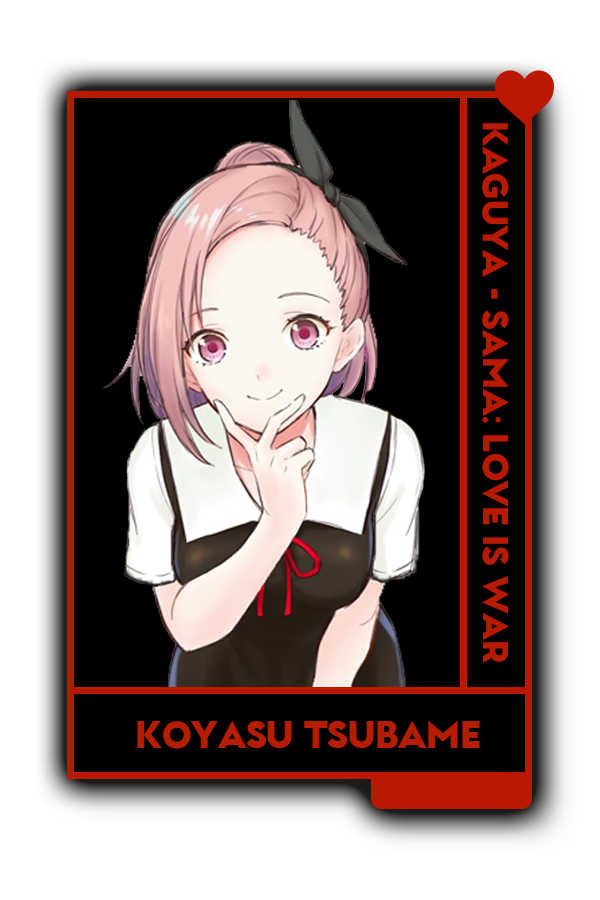
<style>
.page{position:relative;width:600px;height:900px;background:#000000}
.page>*{position:absolute;margin:0}
.t1{font:34px "GarnetCapitalsBlack-Regular";color:#b52616}
.t2{font:35.7px "GarnetCapitalsBlack-Regular";color:#b22818}
</style>
<div class="page">
<p class="t1" style="left:482px;top:123px;width:27px;height:540px;rotate:90deg">Kaguya - Sama: Love is war</p>
<p class="t2" style="left:137px;top:721px;width:343px;height:28px">Koyasu Tsubame</p>
</div>
